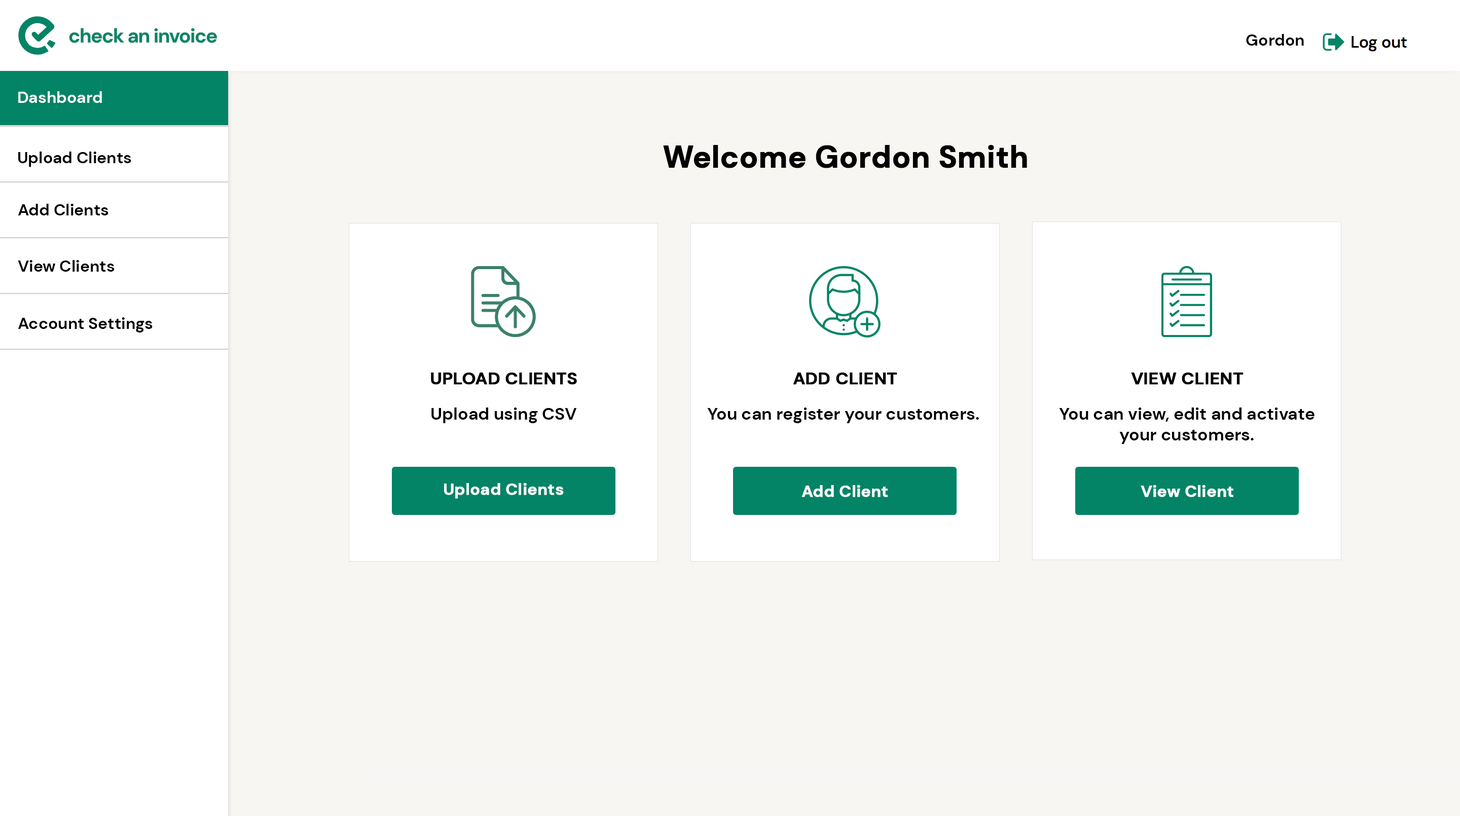
<style>
.page{position:relative;width:1460px;height:816px;background:#f7f6f2}
.page>*{position:absolute;margin:0}
.t1{font:16.2px "DMSans-Bold";color:#000000}
.t2{font:16.2px "DMSans-Bold";color:#ffffff}
.t3{font:30.4px "DMSans-Bold";color:#000000;font-weight:bold}
.t4{font:17.2px "DMSans-Bold";color:#000000;text-transform:uppercase;font-weight:bold}
.t5{font:17.2px "DMSans-Bold";color:#000000}
.t6{font:16.2px "DMSans-Bold";color:#ffffff;font-weight:bold}
</style>
<div class="page">
<p class="t1" style="left:1246px;top:34px;width:58px;height:12px">Gordon</p>
<p class="t2" style="left:18px;top:91px;width:84px;height:12px">Dashboard</p>
<p class="t3" style="left:663px;top:145px;width:364px;height:23px">Welcome Gordon Smith</p>
<p class="t1" style="left:18px;top:152px;width:113px;height:15px">Upload Clients</p>
<p class="t1" style="left:18px;top:204px;width:91px;height:12px">Add Clients</p>
<p class="t1" style="left:18px;top:260px;width:97px;height:12px">View Clients</p>
<p class="t1" style="left:18px;top:317px;width:135px;height:16px">Account Settings</p>
<p class="t4" style="left:431px;top:373px;width:146px;height:12px">Upload Clients</p>
<p class="t4" style="left:793px;top:373px;width:105px;height:12px">Add Client</p>
<p class="t4" style="left:1131px;top:373px;width:113px;height:12px">View Client</p>
<p class="t5" style="left:432px;top:408px;width:145px;height:15px">Upload using CSV</p>
<p class="t5" style="left:707px;top:408px;width:272px;height:15px">You can register your customers.</p>
<p class="t5" style="left:1059px;top:408px;width:256px;height:36px;text-align:center">You can view, edit and activate  your customers.</p>
<p class="t6" style="left:444px;top:483px;width:120px;height:16px">Upload Clients</p>
<p class="t6" style="left:802px;top:485px;width:86px;height:12px">Add Client</p>
<p class="t6" style="left:1141px;top:485px;width:93px;height:12px">View Client</p>
</div>
